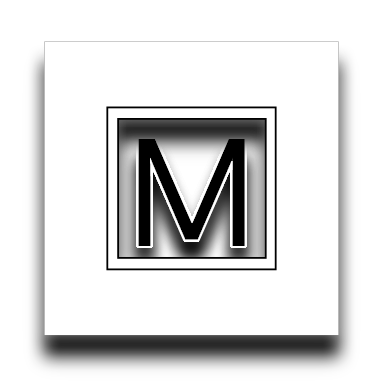
<style>
.page{position:relative;width:384px;height:384px;background:#ffffff}
.page>*{position:absolute;margin:0}
.t1{font:148px "Oxygen-Regular";color:#000000}
</style>
<div class="page">
<p class="t1" style="left:138px;top:139px;width:107px;height:107px">M</p>
</div>
